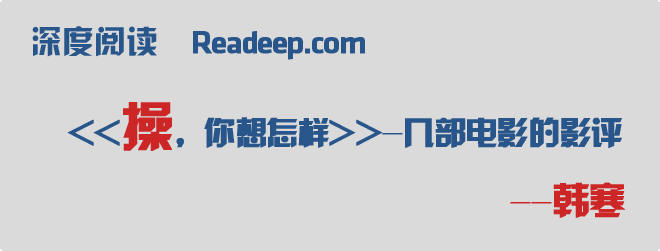
<style>
.page{position:relative;width:660px;height:251px;background:#dadada}
.page>*{position:absolute;margin:0}
.t1{font:32px "HYk2gj";color:#28568a}
.t2{font:32px "KlavikaMedium-OSF";letter-spacing:-0.05em;color:#28568a;font-weight:bold}
.t3{font:32px "HYk2gj";letter-spacing:-0.05em;color:#28568a;font-weight:bold}
.t4{font:53.3px "HYk2gj";letter-spacing:-0.05em;color:#cd2626;font-weight:bold}
.t5{font:32px "HYk2gj";letter-spacing:-0.05em;color:#cd2626;font-weight:bold}
.t6{font:37.3px "HYk2gj";letter-spacing:-0.05em;color:#cd2626;font-weight:bold}
</style>
<div class="page">
<p class="t1" style="left:32px;top:26px;width:125px;height:31px">深度阅读</p>
<p class="t2" style="left:193px;top:31px;width:172px;height:29px">Readeep.com</p>
<p class="t3" style="left:67px;top:102px;width:555px;height:49px">&lt;&lt;<span class="t4">操</span>，你想怎样&gt;&gt;-几部电影的影评</p>
<p class="t5" style="left:510px;top:182px;width:115px;height:36px">--<span class="t6">韩寒</span></p>
</div>
